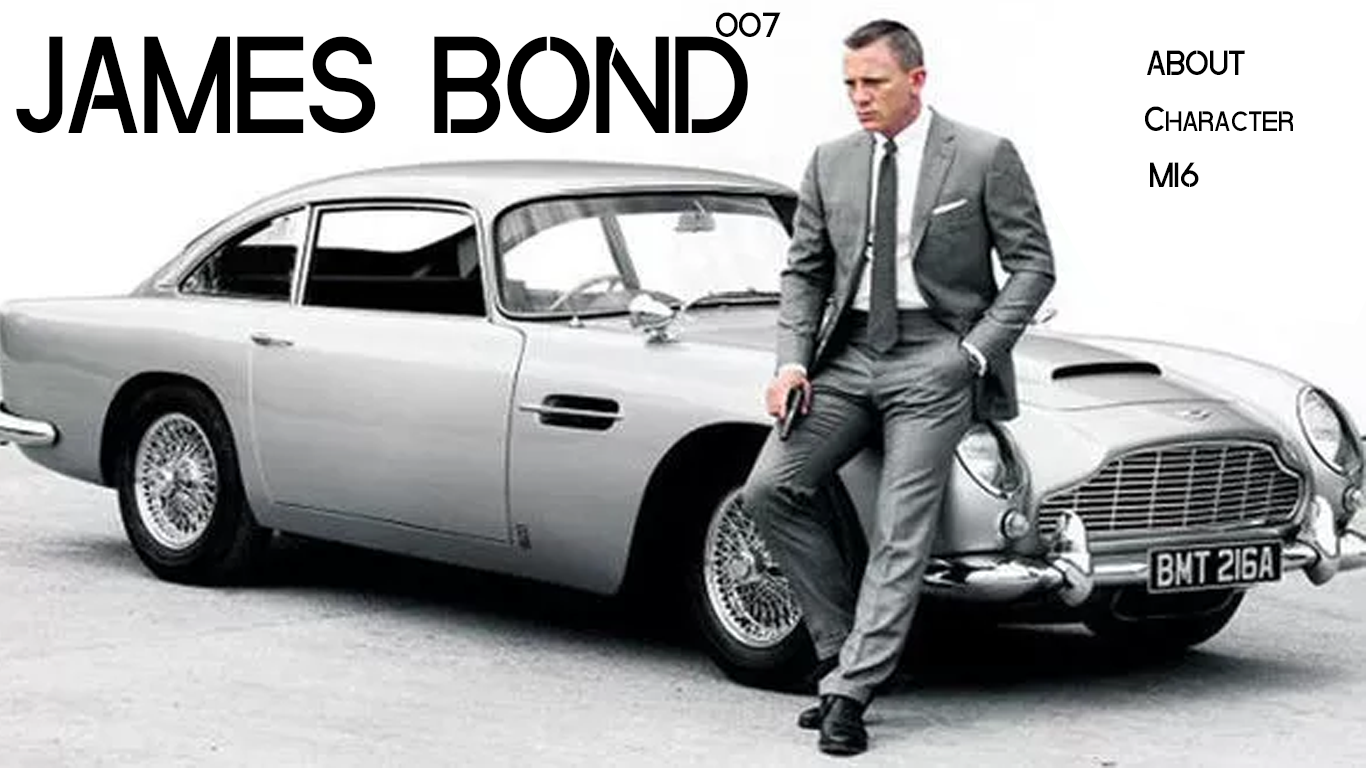
<style>
.page{position:relative;width:1366px;height:768px;background:#ffffff}
.page>*{position:absolute;margin:0}
.t1{font:36px "Quantum";color:#000000}
.t2{font:140.8px "Quantum";color:#000000;scale:0.96 1}
</style>
<div class="page">
<p class="t1" style="left:716px;top:12px;width:65px;height:25px">007</p>
<p class="t2" style="left:16px;top:36px;width:732px;height:97px">JAMES BOND</p>
<p class="t1" style="left:1147px;top:50px;width:98px;height:25px">ABOUT</p>
<p class="t1" style="left:1145px;top:106px;width:148px;height:25px">Character</p>
<p class="t1" style="left:1150px;top:162px;width:49px;height:25px">MI6</p>
</div>
